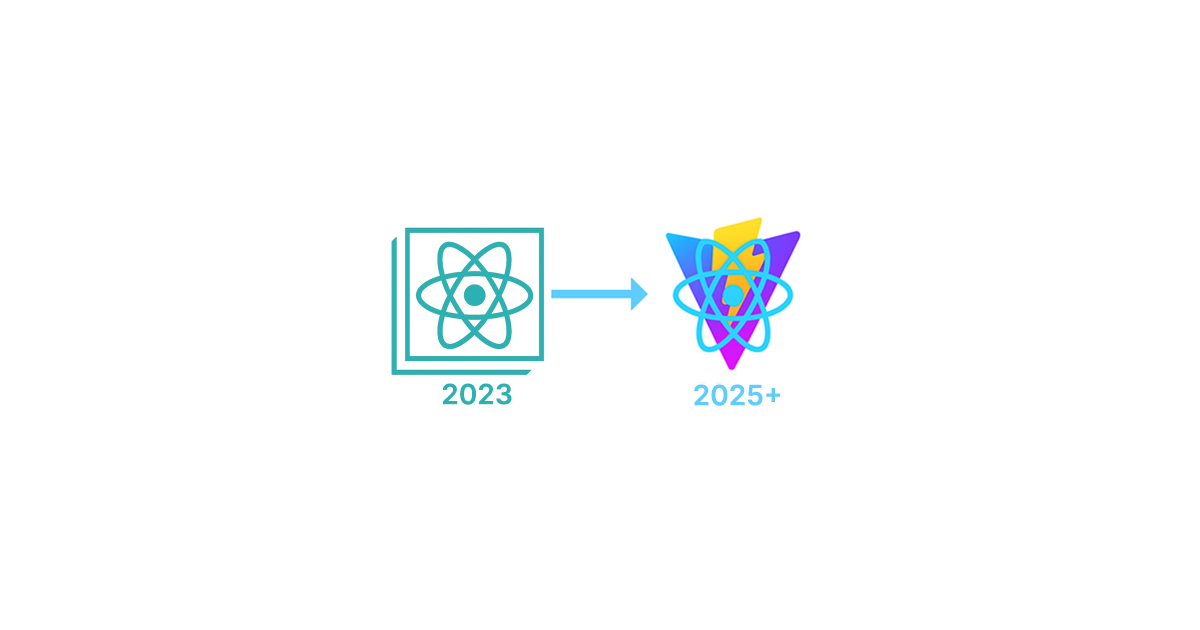
<style>
.page{position:relative;width:1200px;height:630px;background:#ffffff}
.page>*{position:absolute;margin:0}
.t1{font:28px "Inter-SemiBold";color:#2cb1b2}
.t2{font:28px "Inter-SemiBold";color:#5ecdfc}
</style>
<div class="page">
<p class="t1" style="left:443px;top:383px;width:69px;height:22px">2023</p>
<p class="t2" style="left:694px;top:384px;width:87px;height:22px">2025+</p>
</div>
